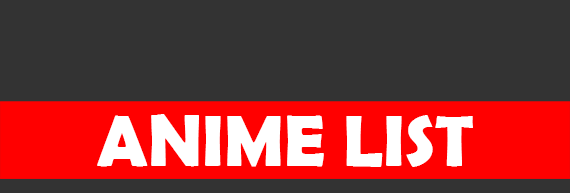
<style>
.page{position:relative;width:570px;height:193px;background:#333333}
.page>*{position:absolute;margin:0}
.t1{font:73.1px "BerlinSansFBDemi-Bold";color:#ffffff}
</style>
<div class="page">
<p class="t1" style="left:97px;top:114px;width:376px;height:53px">ANIME LIST</p>
</div>
